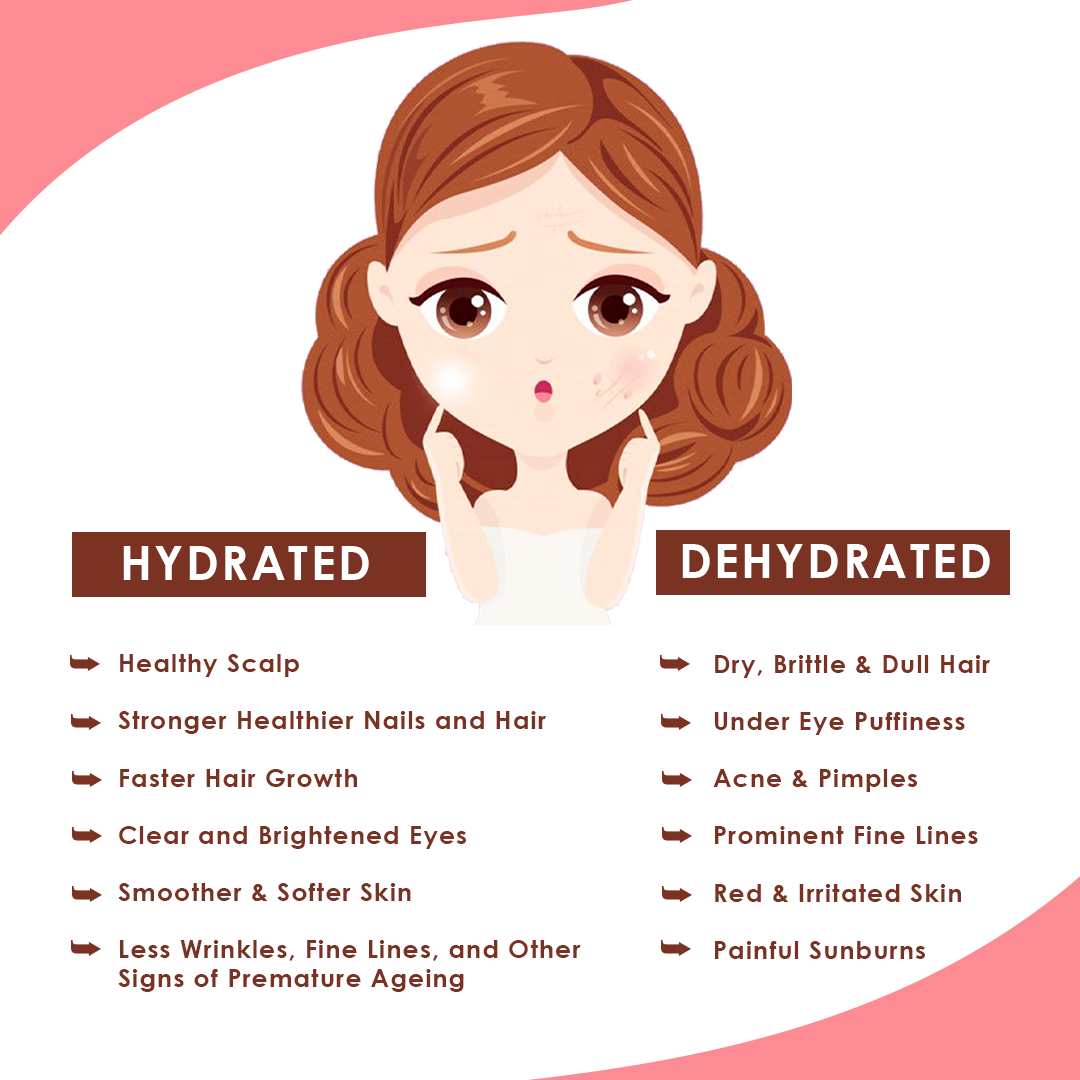
<style>
.page{position:relative;width:1080px;height:1080px;background:#ffffff}
.page>*{position:absolute;margin:0}
.t1{font:47.2px "CenturyGothic-Bold";letter-spacing:0.05em;color:#ffffff}
.t2{font:24.9px/28.6px "CenturyGothic-Bold";letter-spacing:0.05em;color:#7a3222}
</style>
<div class="page">
<p class="t1" style="left:682px;top:544px;width:308px;height:34px">DEHYDRATED</p>
<p class="t1" style="left:123px;top:546px;width:246px;height:34px">HYDRATED</p>
<p class="t2" style="left:118px;top:654px;width:463px;height:338px">Healthy Scalp<br><br>Stronger Healthier Nails and Hair<br><br>Faster Hair Growth<br><br>Clear and Brightened Eyes<br><br>Smoother &amp; Softer Skin<br><br>Less Wrinkles, Fine Lines, and Other <br>Signs of Premature Ageing</p>
<p class="t2" style="left:713px;top:655px;width:277px;height:304px">Dry, Brittle &amp; Dull Hair<br><br>Under Eye Puffiness<br><br>Acne &amp; Pimples<br><br>Prominent Fine Lines<br><br>Red &amp; Irritated Skin<br><br>Painful Sunburns</p>
</div>
